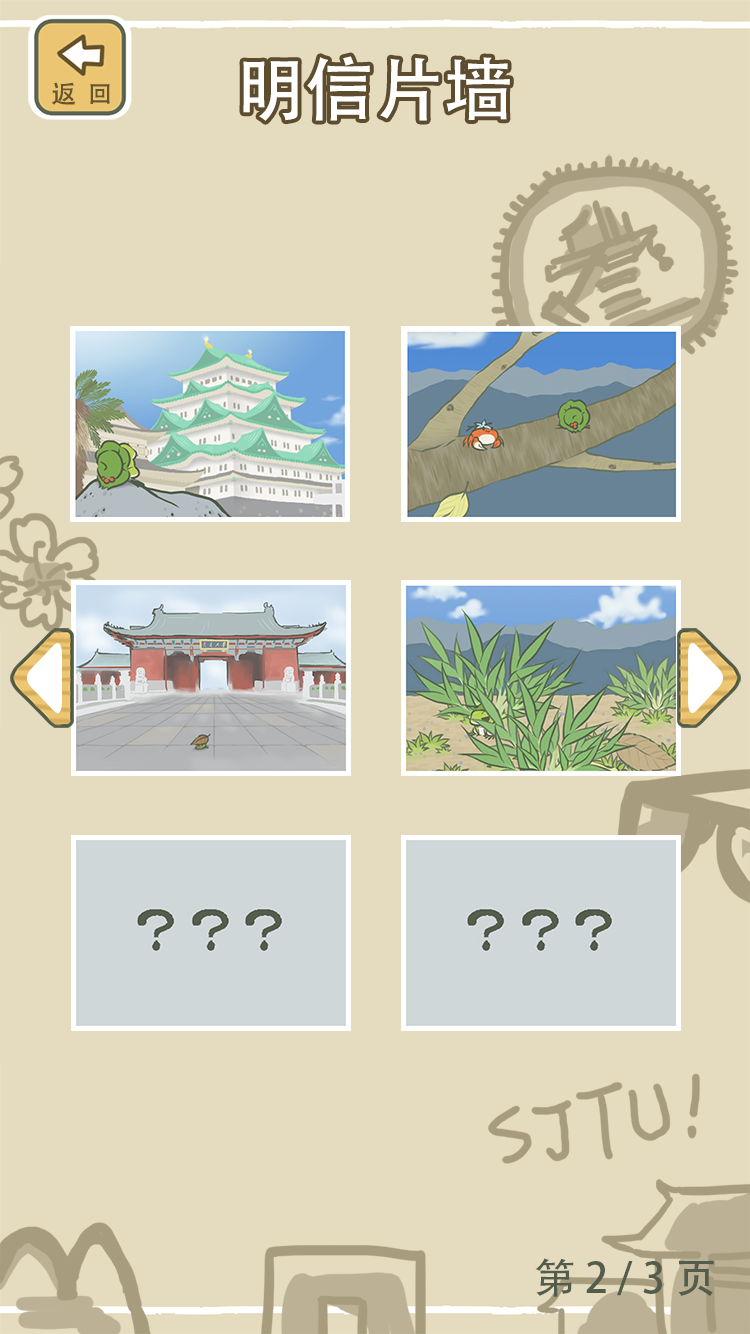
<style>
.page{position:relative;width:750px;height:1334px;background:#e5dcbf}
.page>*{position:absolute;margin:0}
.t1{font:69.5px "AdobeHeitiStd-Regular";color:#fefefd}
.t2{font:25px "AdobeHeitiStd-Regular";color:#67552d}
.t3{font:41.7px "AdobeHeitiStd-Regular";color:#545d4c}
</style>
<div class="page">
<p class="t1" style="left:243px;top:56px;width:267px;height:65px">明信片墙</p>
<p class="t2" style="left:52px;top:82px;width:58px;height:23px">返  回</p>
<p class="t3" style="left:535px;top:1258px;width:179px;height:39px">第 2 / 3 页</p>
</div>
